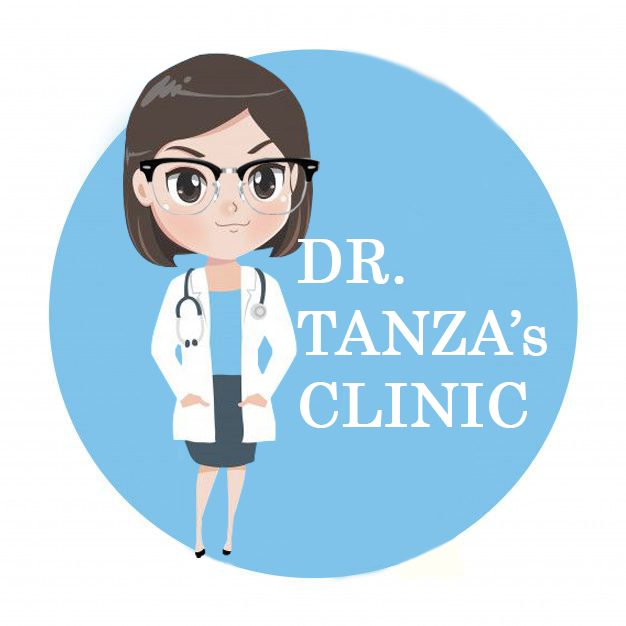
<style>
.page{position:relative;width:626px;height:626px;background:#7fc3ea}
.page>*{position:absolute;margin:0}
.t1{font:59.9px "Century";color:#ffffff;font-weight:bold}
</style>
<div class="page">
<p class="t1" style="left:297px;top:239px;width:250px;height:189px">DR. TANZA’s<br>CLINIC</p>
</div>
